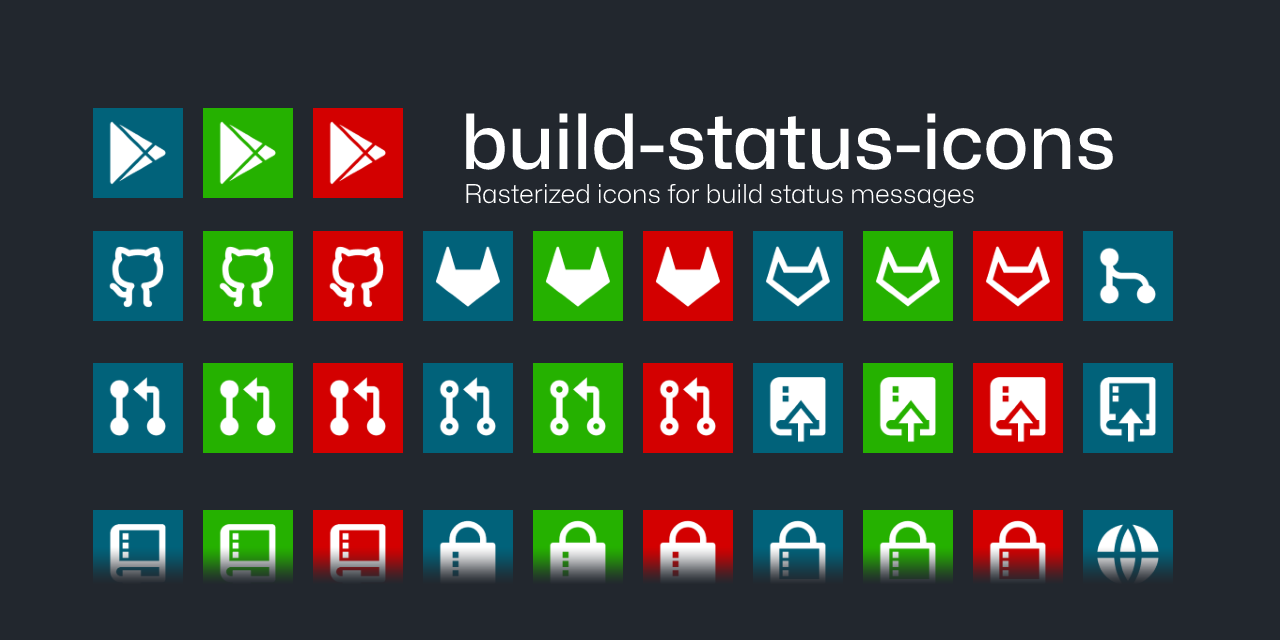
<style>
.page{position:relative;width:1280px;height:640px;background:#22272e}
.page>*{position:absolute;margin:0}
.t1{font:76.2px "Mona-Sans-Medium";color:#ffffff}
.t2{font:26px "Mona-Sans-Light";color:#ffffff}
</style>
<div class="page">
<p class="t1" style="left:466px;top:113px;width:647px;height:57px">build-status-icons</p>
<p class="t2" style="left:466px;top:184px;width:508px;height:24px">Rasterized icons for build status messages</p>
</div>
